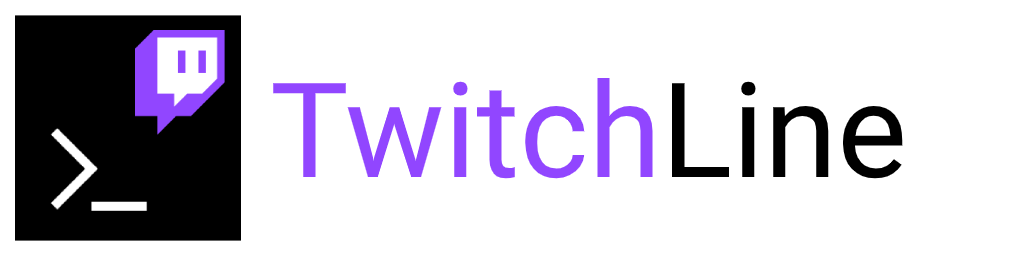
<style>
.page{position:relative;width:1024px;height:256px;background:#ffffff}
.page>*{position:absolute;margin:0}
.t1{font:132px "Roboto-Regular";color:#9146ff}
.t2{font:132px "Roboto-Regular";color:#000000}
</style>
<div class="page">
<p class="t1" style="left:273px;top:78px;width:630px;height:101px">Twitch<span class="t2">Line</span></p>
</div>
